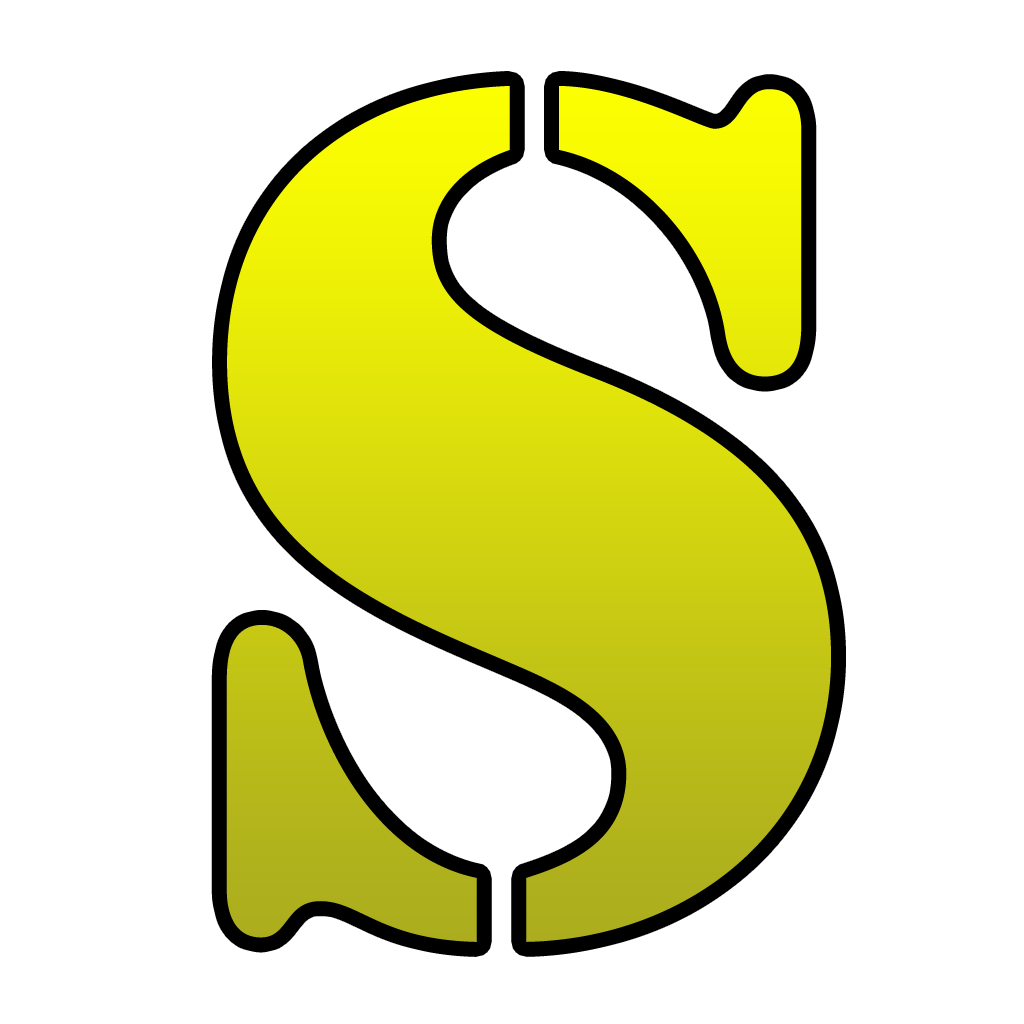
<style>
.page{position:relative;width:1024px;height:1024px;background:#ffffff}
.page>*{position:absolute;margin:0}
.t1{font:1100px "StencilStd"}
</style>
<div class="page">
<p class="t1" style="left:226px;top:86px;width:605px;height:856px">S</p>
</div>
